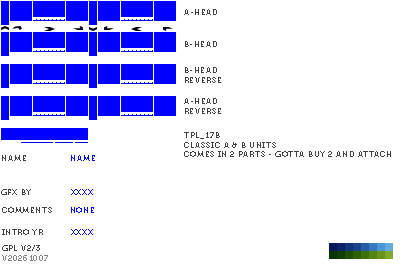
<style>
.page{position:relative;width:400px;height:265px;background:#ffffff}
.page>*{position:absolute;margin:0}
.t1{font:8px "Museo700-Regular";letter-spacing:0.075em;color:#404040;text-transform:uppercase}
.t2{font:8px "Museo700-Regular";letter-spacing:0.075em;color:#0000ff;text-transform:uppercase}
.t3{font:8px "Museo700-Regular";letter-spacing:0.075em;color:#848484;text-transform:uppercase}
</style>
<div class="page">
<p class="t1" style="left:184px;top:9px;width:33px;height:6px">a-head</p>
<p class="t1" style="left:185px;top:41px;width:32px;height:6px">b-head</p>
<p class="t1" style="left:185px;top:67px;width:36px;height:16px">b-head<br>reverse</p>
<p class="t1" style="left:184px;top:98px;width:37px;height:16px">a-head<br>reverse</p>
<p class="t1" style="left:184px;top:132px;width:207px;height:25px">tpl_17b<br>Classic A &amp; B Units<br>comes in 2 parts - gotta buy 2 and attach</p>
<p class="t1" style="left:2px;top:155px;width:24px;height:6px">name</p>
<p class="t2" style="left:71px;top:155px;width:24px;height:6px">name</p>
<p class="t1" style="left:1px;top:189px;width:30px;height:6px">gfx by</p>
<p class="t2" style="left:71px;top:189px;width:22px;height:6px">xxxx</p>
<p class="t1" style="left:2px;top:207px;width:50px;height:6px">comments</p>
<p class="t2" style="left:71px;top:207px;width:23px;height:6px">none</p>
<p class="t1" style="left:2px;top:229px;width:41px;height:6px">intro yr</p>
<p class="t2" style="left:71px;top:229px;width:22px;height:6px">xxxx</p>
<p class="t1" style="left:2px;top:245px;width:38px;height:6px">gpl v2/3</p>
<p class="t3" style="left:2px;top:255px;width:46px;height:6px">v20261007</p>
</div>
